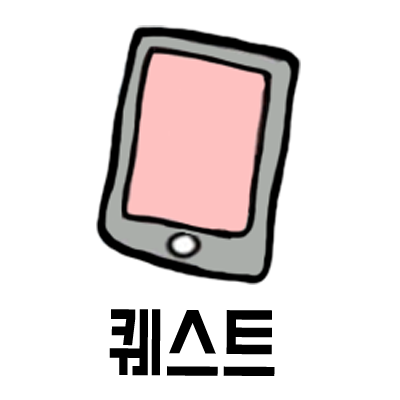
<style>
.page{position:relative;width:400px;height:400px;background:#ffffff}
.page>*{position:absolute;margin:0}
.t1{font:69.8px "BMDoHyeon";color:#000000;scale:0.84 1}
</style>
<div class="page">
<p class="t1" style="left:109px;top:309px;width:166px;height:67px">퀘스트</p>
</div>
